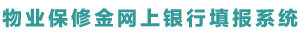
<style>
.page{position:relative;width:300px;height:35px;background:#ffffff}
.page>*{position:absolute;margin:0}
.t1{font:20px "FZLTTHJW--GB1-0";letter-spacing:0.15em;color:#339999}
</style>
<div class="page">
<p class="t1" style="left:2px;top:8px;width:296px;height:20px">物业保修金网上银行填报系统</p>
</div>
